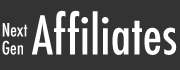
<style>
.page{position:relative;width:180px;height:70px;background:#333333}
.page>*{position:absolute;margin:0}
.t1{font:52px "Futura-CondensedMedium";color:#ffffff}
.t2{font:18px/18px "Futura-CondensedMedium";color:#ffffff}
</style>
<div class="page">
<p class="t1" style="left:31px;top:10px;width:146px;height:45px">Affiliates</p>
<p class="t2" style="left:2px;top:23px;width:26px;height:32px">Next<br>Gen</p>
</div>
